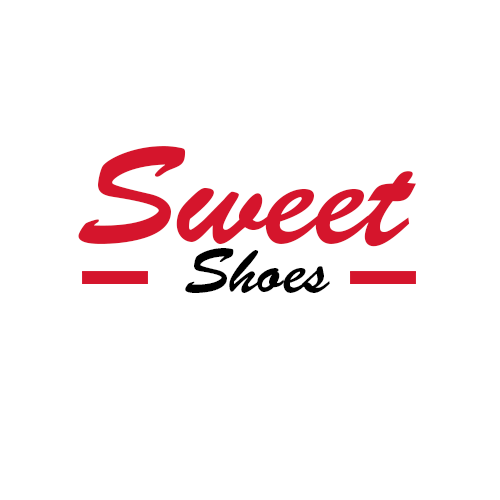
<style>
.page{position:relative;width:500px;height:500px;background:#ffffff}
.page>*{position:absolute;margin:0}
.t1{font:69.9px "BrushScriptStd";color:#d5152c}
.t2{font:31.9px "BrushScriptStd";color:#000000}
</style>
<div class="page">
<p class="t1" style="left:78px;top:146px;width:338px;height:101px">Sweet</p>
<p class="t2" style="left:185px;top:248px;width:145px;height:45px">Shoes</p>
</div>
